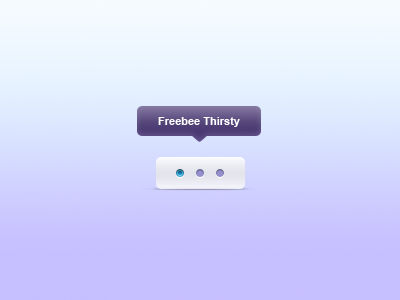
<style>
.page{position:relative;width:400px;height:300px}
.page>*{position:absolute;margin:0}
.t1{font:11px "Arial-BoldMT";color:#ffffff}
</style>
<div class="page">
<p class="t1" style="left:158px;top:117px;width:82px;height:10px">Freebee Thirsty</p>
</div>
